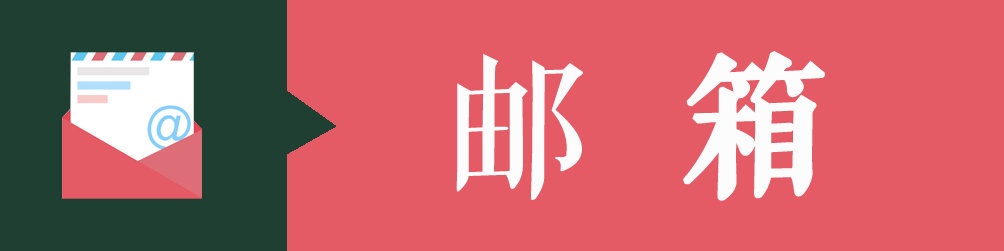
<style>
.page{position:relative;width:1004px;height:251px;background:#e45b65}
.page>*{position:absolute;margin:0}
.t1{font:151.1px "FZQKBYSJW--GB1-0";color:#fcfcfc;font-weight:bold}
</style>
<div class="page">
<p class="t1" style="left:456px;top:51px;width:369px;height:150px">邮  箱</p>
</div>
